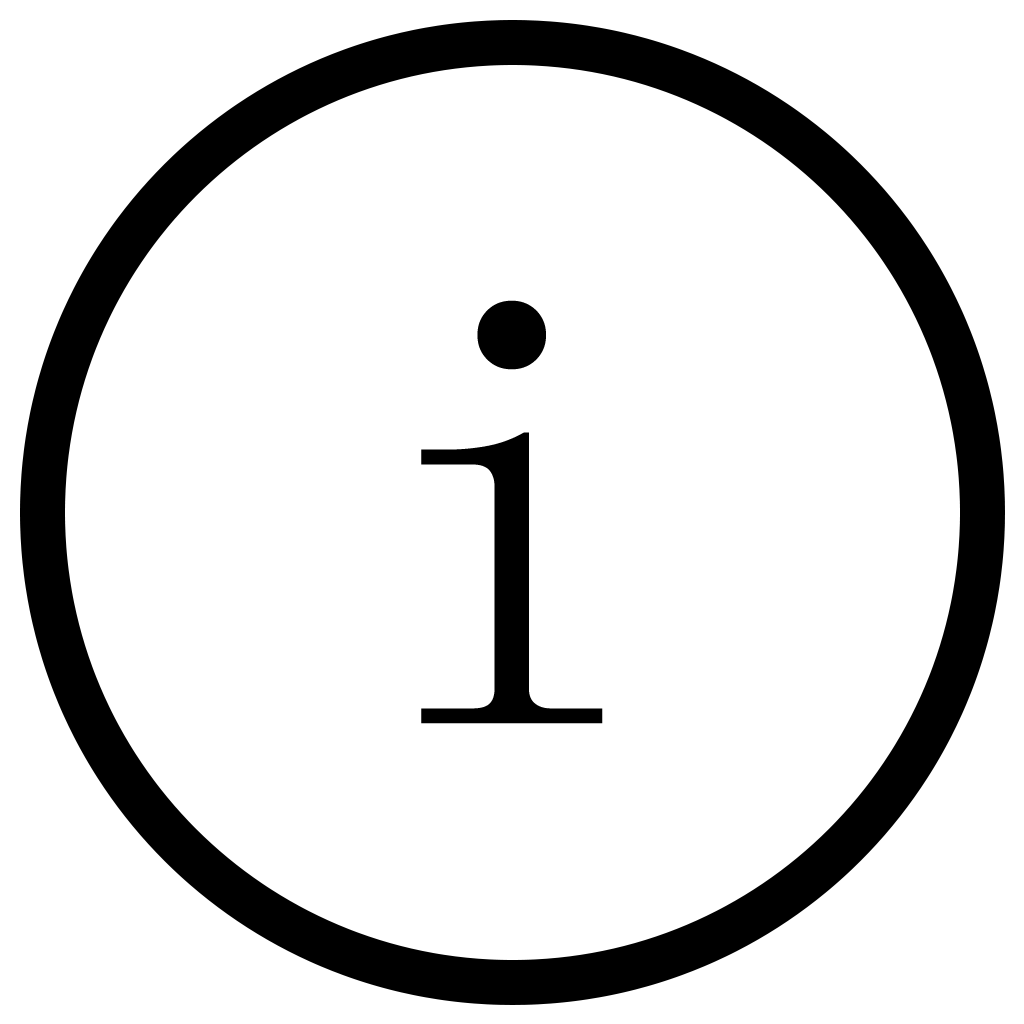
<style>
.page{position:relative;width:1024px;height:1024px;background:#ffffff}
.page>*{position:absolute;margin:0}
.t1{font:625px "FangSong";letter-spacing:0.075em;color:#000000}
</style>
<div class="page">
<p class="t1" style="left:421px;top:300px;width:182px;height:424px">i</p>
</div>
